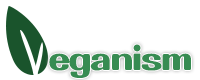
<style>
.page{position:relative;width:200px;height:80px;background:#ffffff}
.page>*{position:absolute;margin:0}
.t1{font:30px "TTTtangsbudaejjigaeB";letter-spacing:-0.075em;color:#378c52}
</style>
<div class="page">
<p class="t1" style="left:49px;top:44px;width:142px;height:34px">eganism</p>
</div>
